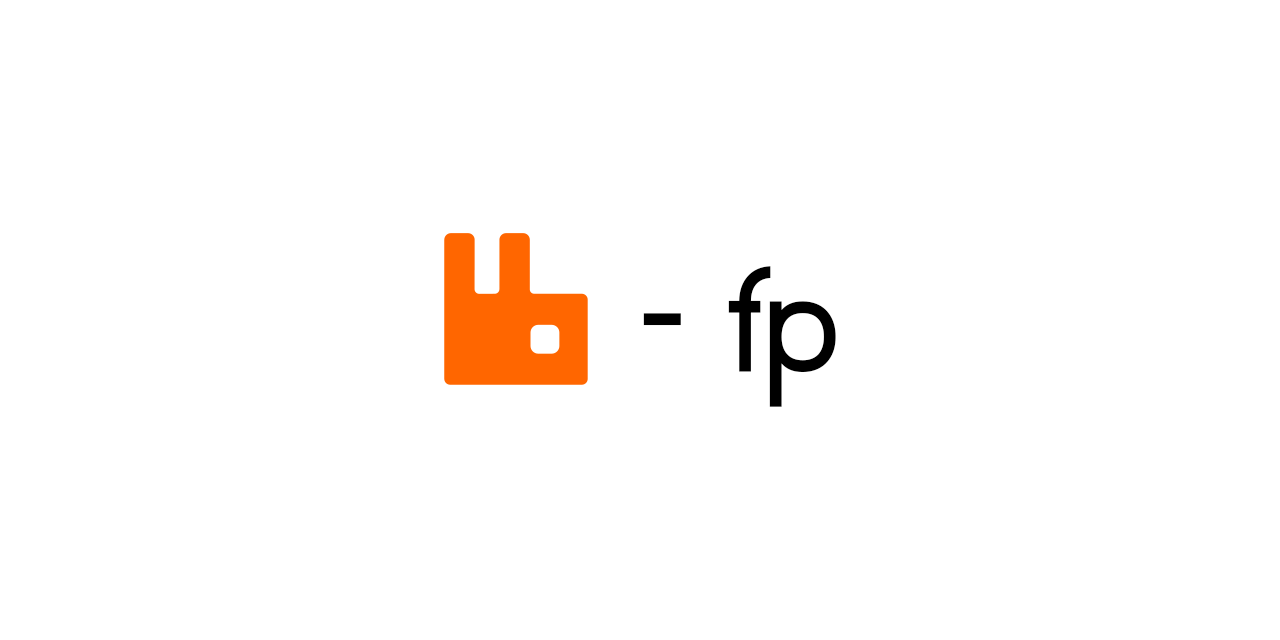
<style>
.page{position:relative;width:1280px;height:640px;background:#ffffff}
.page>*{position:absolute;margin:0}
.t1{font:150px "KayakSans";color:#000000}
</style>
<div class="page">
<p class="t1" style="left:643px;top:266px;width:193px;height:141px">- fp</p>
</div>
